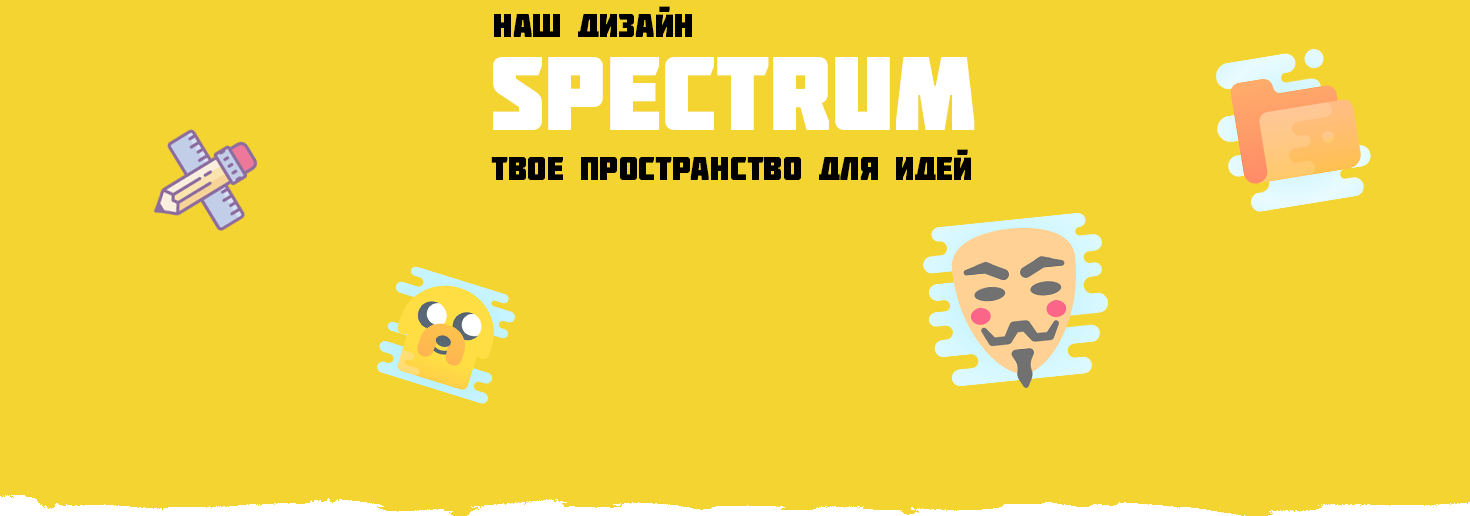
<style>
.page{position:relative;width:1470px;height:516px;background:#f4d430}
.page>*{position:absolute;margin:0}
.t1{font:32.3px "Molot";color:#000000}
.t2{font:104.8px "Molot";color:#ffffff}
</style>
<div class="page">
<p class="t1" style="left:494px;top:6px;width:198px;height:31px">наш дизайн</p>
<p class="t2" style="left:493px;top:57px;width:482px;height:73px">Spectrum</p>
<p class="t1" style="left:491px;top:149px;width:480px;height:31px">твое пространство для идей</p>
</div>
